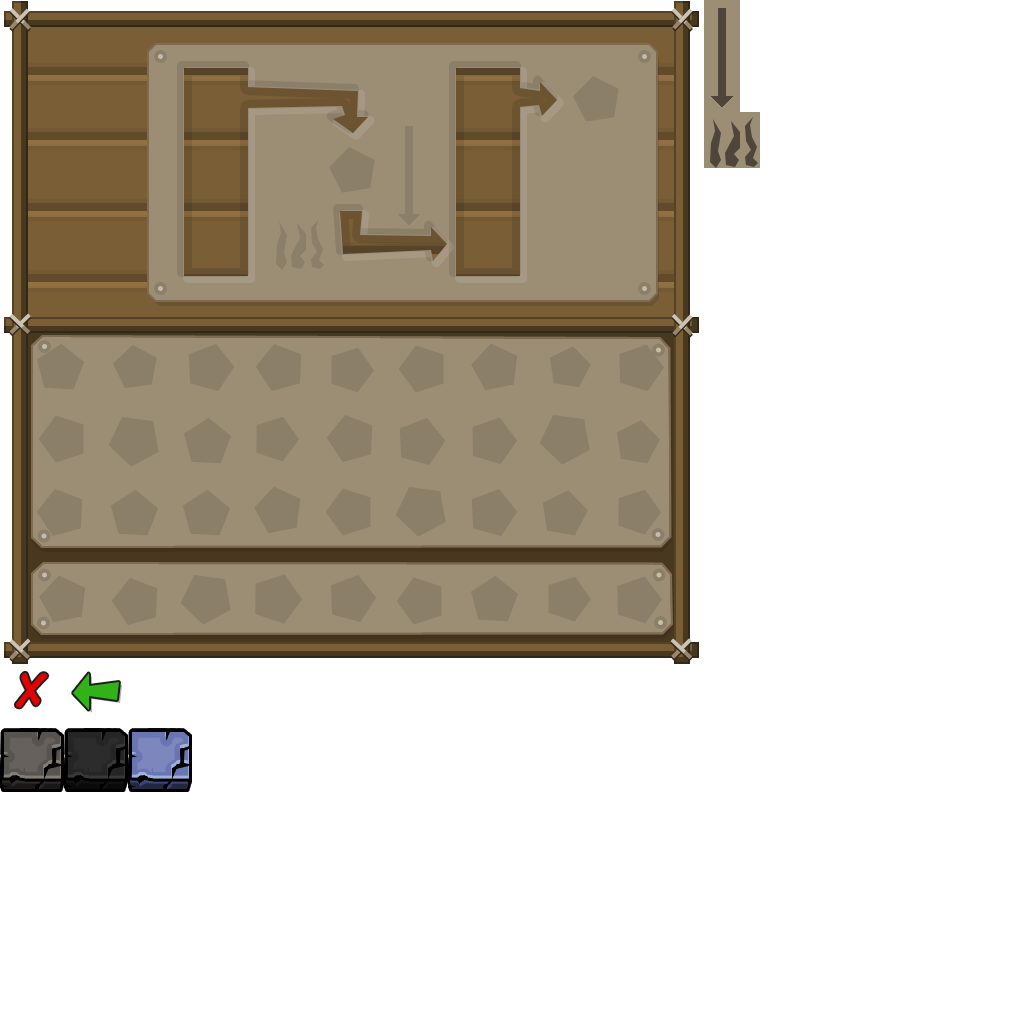
<style>
.page{position:relative;width:1024px;height:1024px;background:#ffffff}
.page>*{position:absolute;margin:0}
.t1{font:35.9px "AnimeAce2.0BB-Bold";letter-spacing:-0.02em;color:#e30000}
</style>
<div class="page">
<p class="t1" style="left:15px;top:673px;width:33px;height:35px">x</p>
</div>
